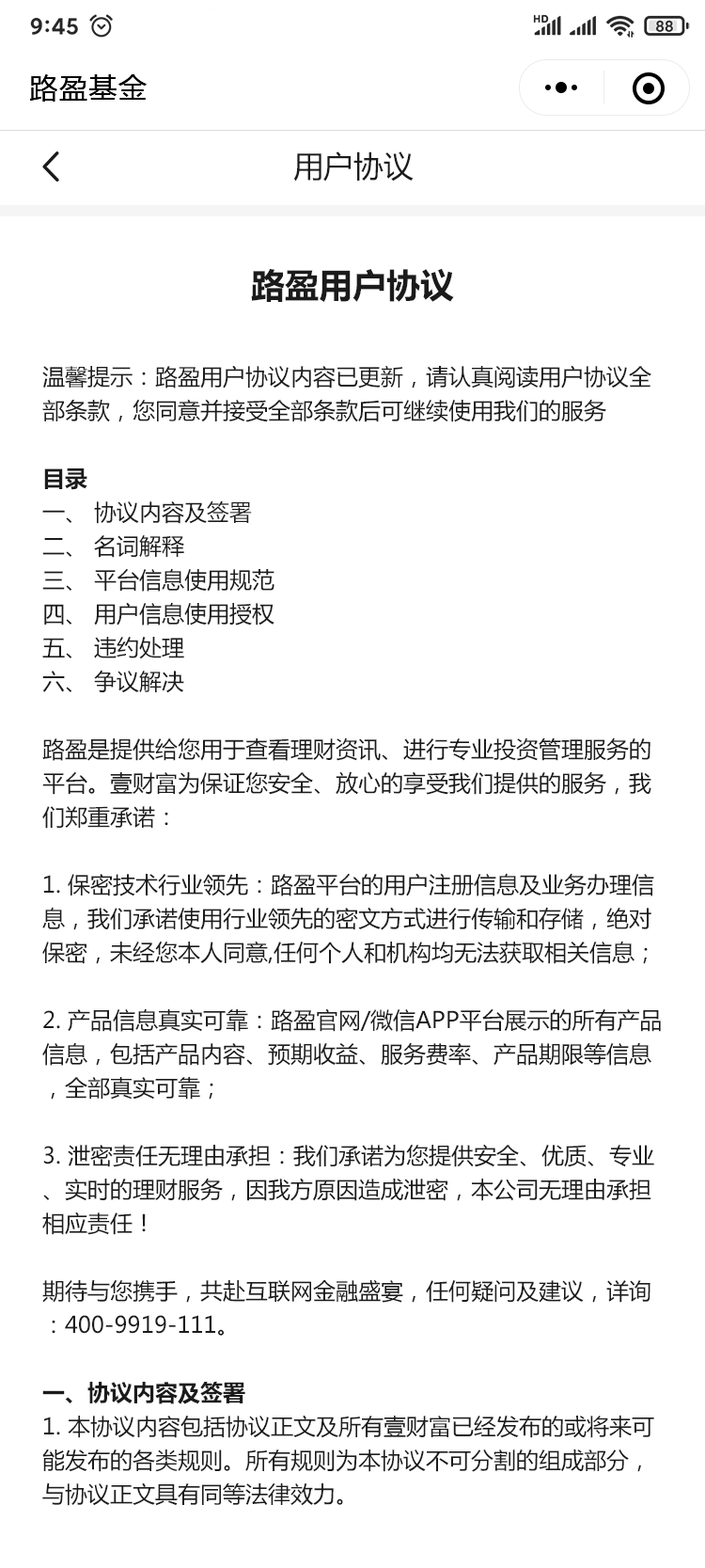
<style>
.page{position:relative;width:705px;height:1568px;background:#ffffff}
.page>*{position:absolute;margin:0}
.t1{font:28.2px "MicrosoftYaHei";letter-spacing:0.05em;color:#000000}
.t2{font:30.1px "MicrosoftYaHei";color:#1b1b1b}
.t3{font:33.9px "MicrosoftYaHei-Bold";color:#1b1b1b}
.t4{font:22.6px/33.9px "MicrosoftYaHei";color:#1b1b1b}
.t5{font:22.6px/33.9px "MicrosoftYaHei-Bold";color:#1b1b1b}
</style>
<div class="page">
<p class="t1" style="left:29px;top:74px;width:118px;height:28px">路盈基金</p>
<p class="t2" style="left:293px;top:151px;width:121px;height:31px">用户协议</p>
<p class="t3" style="left:251px;top:268px;width:203px;height:34px">路盈用户协议</p>
<p class="t4" style="left:42px;top:365px;width:619px;height:1141px">温馨提示：路盈用户协议内容已更新，请认真阅读用户协议全部条款，您同意并接受全部条款后可继续使用我们的服务<br><br><span class="t5">目录<br></span>一、 协议内容及签署<br>二、 名词解释<br>三、 平台信息使用规范<br>四、 用户信息使用授权<br>五、 违约处理<br>六、 争议解决<br><br>路盈是提供给您用于查看理财资讯、进行专业投资管理服务的平台。壹财富为保证您安全、放心的享受我们提供的服务，我们郑重承诺：<br><br>1. 保密技术行业领先：路盈平台的用户注册信息及业务办理信息，我们承诺使用行业领先的密文方式进行传输和存储，绝对保密，未经您本人同意,任何个人和机构均无法获取相关信息；<br><br>2. 产品信息真实可靠：路盈官网/微信APP平台展示的所有产品信息，包括产品内容、预期收益、服务费率、产品期限等信息，全部真实可靠；<br><br>3. 泄密责任无理由承担：我们承诺为您提供安全、优质、专业、实时的理财服务，因我方原因造成泄密，本公司无理由承担相应责任！<br><br>期待与您携手，共赴互联网金融盛宴，任何疑问及建议，详询：400-9919-111。<br><br><span class="t5">一、协议内容及签署</span><br>1. 本协议内容包括协议正文及所有壹财富已经发布的或将来可能发布的各类规则。所有规则为本协议不可分割的组成部分，与协议正文具有同等法律效力。<br><br>2. 您应当在使用壹财富服务之前认真阅读全部协议内容，对于协议中以加粗字体显示的内容，您应重点阅读。如您使用壹财富服务，则本协议即对您产生约束，届时您不应以未阅读本协议的内容为由，主张本协议无效，或要求撤销本协议。<br><br>3. 您承诺接受并遵守本协议的约定。如果您不同意本协议的约定，您应立即停止注册使用壹财富。如果您注册完成本平台，将被视为接受本协议全部条款，接受本协议约束。</p>
</div>
